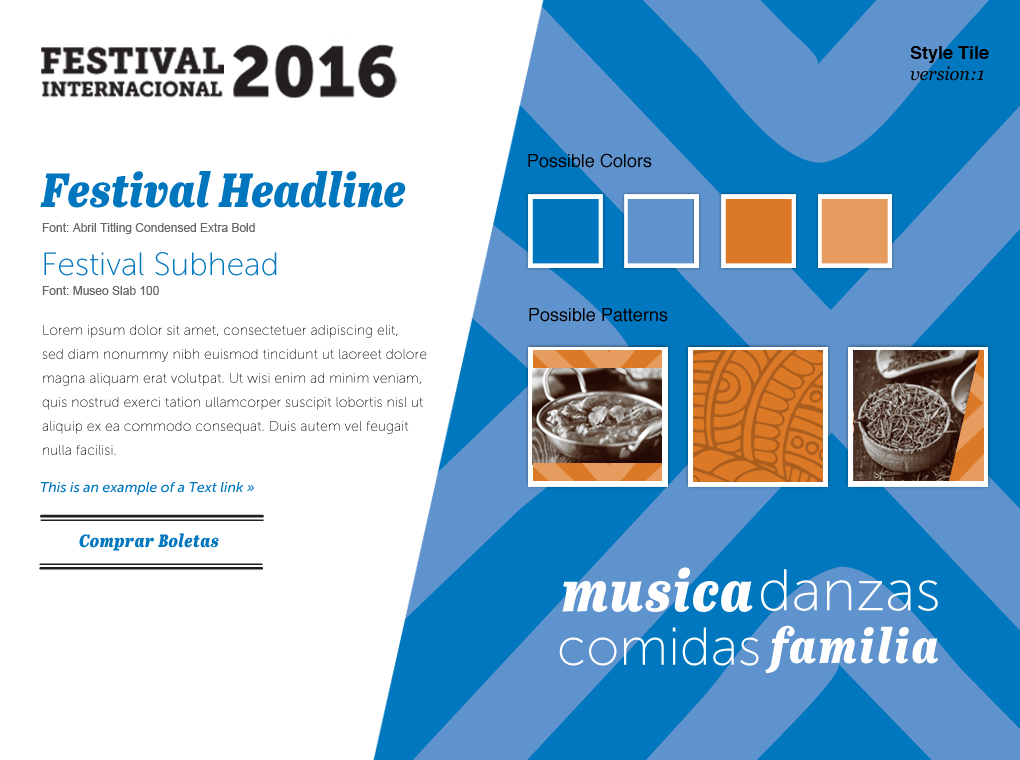
<style>
.page{position:relative;width:1020px;height:760px;background:#ffffff}
.page>*{position:absolute;margin:0}
.t1{font:18px "Helvetica-Bold";color:#000000}
.t2{font:18px "Georgia-Italic";color:#000000}
.t3{font:18px "Helvetica";color:#000000}
.t4{font:48px "AbrilTitlingCndEb-Italic";color:#0076be}
.t5{font:12px "ArialMT";color:#666666}
.t6{font:32px "MuseoSans-100";color:#0076be}
.t7{font:14px/24px "MuseoSans-100"}
.t8{font:14px "MuseoSans-500Italic";color:#0076be}
.t9{font:18px "AbrilTitlingCndEb-Italic";letter-spacing:0.025em;color:#0076be}
.t10{font:58.8px "AbrilTitlingCndEb-Italic";letter-spacing:0.025em;color:#ffffff}
.t11{font:58.5px "MuseoSans-100";color:#ffffff}
.t12{font:53.2px "MuseoSans-100";color:#ffffff}
.t13{font:48.4px "AbrilTitlingCndEb-Italic";letter-spacing:0.05em;color:#ffffff}
</style>
<div class="page">
<p class="t1" style="left:910px;top:46px;width:79px;height:17px">Style Tile</p>
<p class="t2" style="left:910px;top:66px;width:74px;height:15px">version:1</p>
<p class="t3" style="left:528px;top:153px;width:124px;height:15px">Possible Colors</p>
<p class="t4" style="left:40px;top:171px;width:366px;height:37px">Festival Headline</p>
<p class="t5" style="left:42px;top:223px;width:213px;height:11px">Font: Abril Titling Condensed Extra Bold</p>
<p class="t6" style="left:44px;top:252px;width:233px;height:24px">Festival Subhead</p>
<p class="t5" style="left:42px;top:286px;width:117px;height:9px">Font: Museo Slab 100</p>
<p class="t3" style="left:529px;top:308px;width:139px;height:14px">Possible Patterns</p>
<p class="t7" style="left:42px;top:325px;width:385px;height:130px">Lorem ipsum dolor sit amet, consectetuer adipiscing elit, <br>sed diam nonummy nibh euismod tincidunt ut laoreet dolore <br>magna aliquam erat volutpat. Ut wisi enim ad minim veniam, <br>quis nostrud exerci tation ullamcorper suscipit lobortis nisl ut <br>aliquip ex ea commodo consequat. Duis autem vel feugait <br>nulla facilisi.</p>
<p class="t8" style="left:40px;top:482px;width:214px;height:13px">This is an example of a Text link »</p>
<p class="t9" style="left:79px;top:533px;width:140px;height:18px">Comprar Boletas</p>
<p class="t10" style="left:562px;top:567px;width:191px;height:45px">musica</p>
<p class="t11" style="left:761px;top:569px;width:177px;height:42px">danzas</p>
<p class="t12" style="left:559px;top:627px;width:200px;height:39px">comidas</p>
<p class="t13" style="left:765px;top:625px;width:174px;height:49px">familia</p>
</div>
